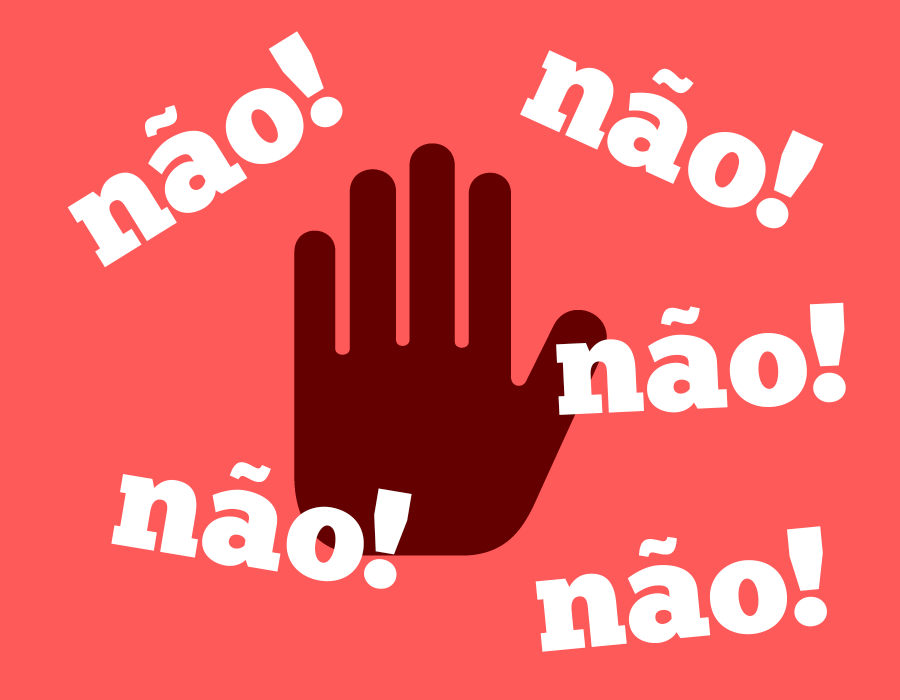
<style>
.page{position:relative;width:900px;height:700px;background:#ff5a5a}
.page>*{position:absolute;margin:0}
.t1{font:141px "ChunkFive-Roman";color:#ffffff}
.t2{font:92.7px "GothamUltra";color:#ffffff}
</style>
<div class="page">
<p class="t1" style="left:67px;top:31px;width:276px;height:237px;rotate:-32deg">nao!</p>
<p class="t1" style="left:520px;top:50px;width:304px;height:179px;rotate:25deg">nao!</p>
<p class="t2" style="left:652px;top:68px;width:42px;height:26px;rotate:25deg">~</p>
<p class="t2" style="left:145px;top:105px;width:32px;height:33px;rotate:-32deg">~</p>
<p class="t1" style="left:556px;top:302px;width:290px;height:113px;rotate:-3deg">nao!</p>
<p class="t2" style="left:661px;top:306px;width:39px;height:20px;rotate:-3deg">~</p>
<p class="t2" style="left:229px;top:462px;width:42px;height:20px;rotate:10deg">~</p>
<p class="t1" style="left:111px;top:474px;width:301px;height:115px;rotate:10deg">nao!</p>
<p class="t1" style="left:535px;top:526px;width:292px;height:126px;rotate:-5deg">nao!</p>
<p class="t2" style="left:639px;top:536px;width:38px;height:21px;rotate:-5deg">~</p>
</div>
